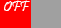
<style>
.page{position:relative;width:61px;height:28px;background:#a0a0a0}
.page>*{position:absolute;margin:0}
.t1{font:14px "Pristina-Regular";color:#fdfffd}
</style>
<div class="page">
<p class="t1" style="left:4px;top:0px;width:26px;height:11px;text-align:center">OFF<br><br>OFF</p>
</div>
